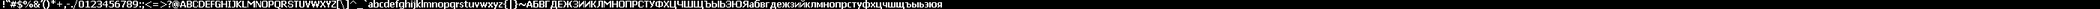
<style>
.page{position:relative;width:2100px;height:9px;background:#000000}
.page>*{position:absolute;margin:0}
.t1{font:9px "Tahoma-Bold";color:#ffffff}
</style>
<div class="page">
<p class="t1" style="left:3px;top:0px;width:939px;height:9px">!“#$%&amp;’()*+,-./0123456789:;&lt;=&gt;?@ABCDEFGHIJKLMNOPQRSTUVWXYZ[\]^_`abcdefghijklmnopqrstuvwxyz{|}~АБВГДЕЖЗИЙКЛМНОПРСТУФХЦЧШЩЪЫЬЭЮЯабвгдежзийклмнопрстуфхцчшщъыьэюя</p>
</div>
